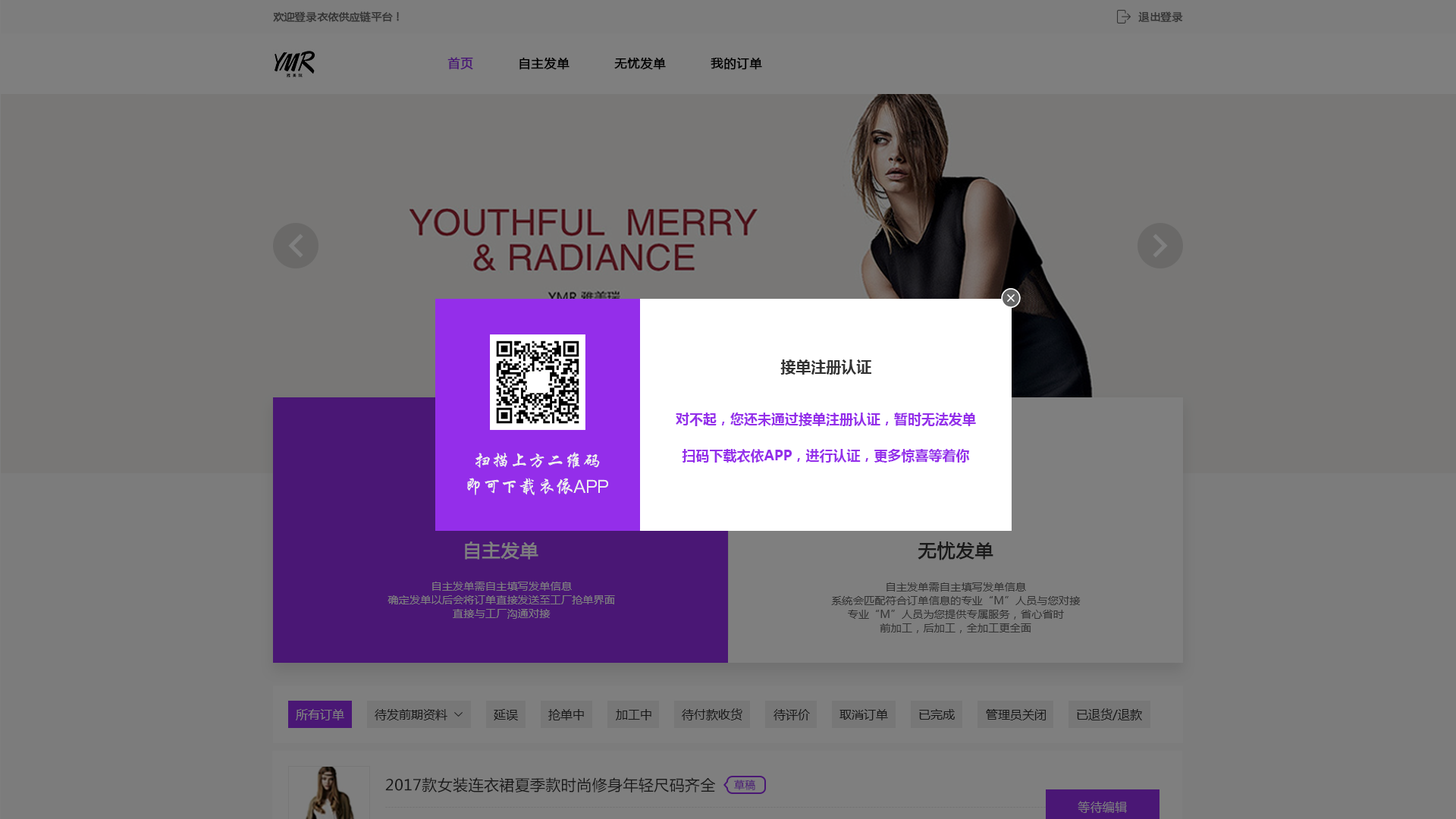
<style>
.page{position:relative;width:1456px;height:819px;background:#787776}
.page>*{position:absolute;margin:0}
.t1{font:10.6px "MicrosoftYaHei";color:#333333;font-weight:bold}
.t2{font:12.1px "MicrosoftYaHei";color:#4a1775;font-weight:bold}
.t3{font:12.1px "MicrosoftYaHei";color:#000000;font-weight:bold}
.t4{font:15.2px "MicrosoftYaHei-Bold";color:#333333}
.t5{font:13.6px/36.4px "MicrosoftYaHei-Bold";color:#942eea}
.t6{font:18.2px "FZXKJW--GB1-0";color:#eeeeee}
.t7{font:18.2px "PingFang-SC-Medium";color:#eeeeee}
.t8{font:18.2px "MicrosoftYaHei";color:#7f7f7f;font-weight:bold}
.t9{font:18.2px "MicrosoftYaHei";color:#191919;font-weight:bold}
.t10{font:10.6px/13.6px "MicrosoftYaHei";letter-spacing:0.02em;color:#7f7f7f}
.t11{font:10.6px/13.6px "MicrosoftYaHei";letter-spacing:0.02em;color:#333333}
.t12{font:12.1px "MicrosoftYaHei";color:#7f7f7f}
.t13{font:12.1px "MicrosoftYaHei";color:#191919}
.t14{font:15.2px "MicrosoftYaHei";letter-spacing:0.02em;color:#191919}
.t15{font:10.6px "MicrosoftYaHei";letter-spacing:0.02em;color:#4a1775}
.t16{font:12.1px "MicrosoftYaHei";letter-spacing:0.02em;color:#7f7f7f}
</style>
<div class="page">
<p class="t1" style="left:273px;top:11px;width:126px;height:12px">欢迎登录衣依供应链平台！</p>
<p class="t1" style="left:1138px;top:11px;width:45px;height:12px">退出登录</p>
<p class="t2" style="left:447px;top:57px;width:26px;height:13px">首页</p>
<p class="t3" style="left:519px;top:58px;width:51px;height:12px">自主发单</p>
<p class="t3" style="left:614px;top:58px;width:52px;height:12px">无忧发单</p>
<p class="t3" style="left:711px;top:58px;width:51px;height:12px">我的订单</p>
<p class="t4" style="left:780px;top:359px;width:91px;height:16px">接单注册认证</p>
<p class="t5" style="left:676px;top:413px;width:300px;height:50px;text-align:center">对不起，您还未通过接单注册认证，暂时无法发单<br>扫码下载衣依APP，进行认证，更多惊喜等着你</p>
<p class="t6" style="left:475px;top:452px;width:125px;height:17px">扫描上方二维码</p>
<p class="t6" style="left:467px;top:478px;width:141px;height:17px">即可下载衣依<span class="t7">APP</span></p>
<p class="t8" style="left:465px;top:541px;width:73px;height:19px">自主发单</p>
<p class="t9" style="left:918px;top:541px;width:75px;height:19px">无忧发单</p>
<p class="t10" style="left:388px;top:582px;width:227px;height:37px;text-align:center">自主发单需自主填写发单信息<br>确定发单以后会将订单直接发送至工厂抢单界面<br>直接与工厂沟通对接</p>
<p class="t11" style="left:831px;top:582px;width:250px;height:51px;text-align:center">自主发单需自主填写发单信息<br>系统会匹配符合订单信息的专业“M”人员与您对接<br>专业“M”人员为您提供专属服务，省心省时<br>前加工，后加工，全加工更全面</p>
<p class="t12" style="left:296px;top:709px;width:48px;height:11px">所有订单</p>
<p class="t13" style="left:375px;top:709px;width:72px;height:11px">待发前期资料</p>
<p class="t13" style="left:494px;top:709px;width:24px;height:11px">延误</p>
<p class="t13" style="left:548px;top:709px;width:36px;height:11px">抢单中</p>
<p class="t13" style="left:616px;top:709px;width:35px;height:11px">加工中</p>
<p class="t13" style="left:682px;top:708px;width:60px;height:12px">待付款收货</p>
<p class="t13" style="left:773px;top:709px;width:37px;height:11px">待评价</p>
<p class="t13" style="left:839px;top:709px;width:49px;height:11px">取消订单</p>
<p class="t13" style="left:919px;top:709px;width:36px;height:11px">已完成</p>
<p class="t13" style="left:986px;top:709px;width:60px;height:11px">管理员关闭</p>
<p class="t13" style="left:1077px;top:708px;width:65px;height:12px">已退货/退款</p>
<p class="t14" style="left:385px;top:777px;width:331px;height:15px">2017款女装连衣裙夏季款时尚修身年轻尺码齐全</p>
<p class="t15" style="left:734px;top:780px;width:21px;height:10px">草稿</p>
<p class="t16" style="left:1078px;top:801px;width:49px;height:12px">等待编辑</p>
</div>
